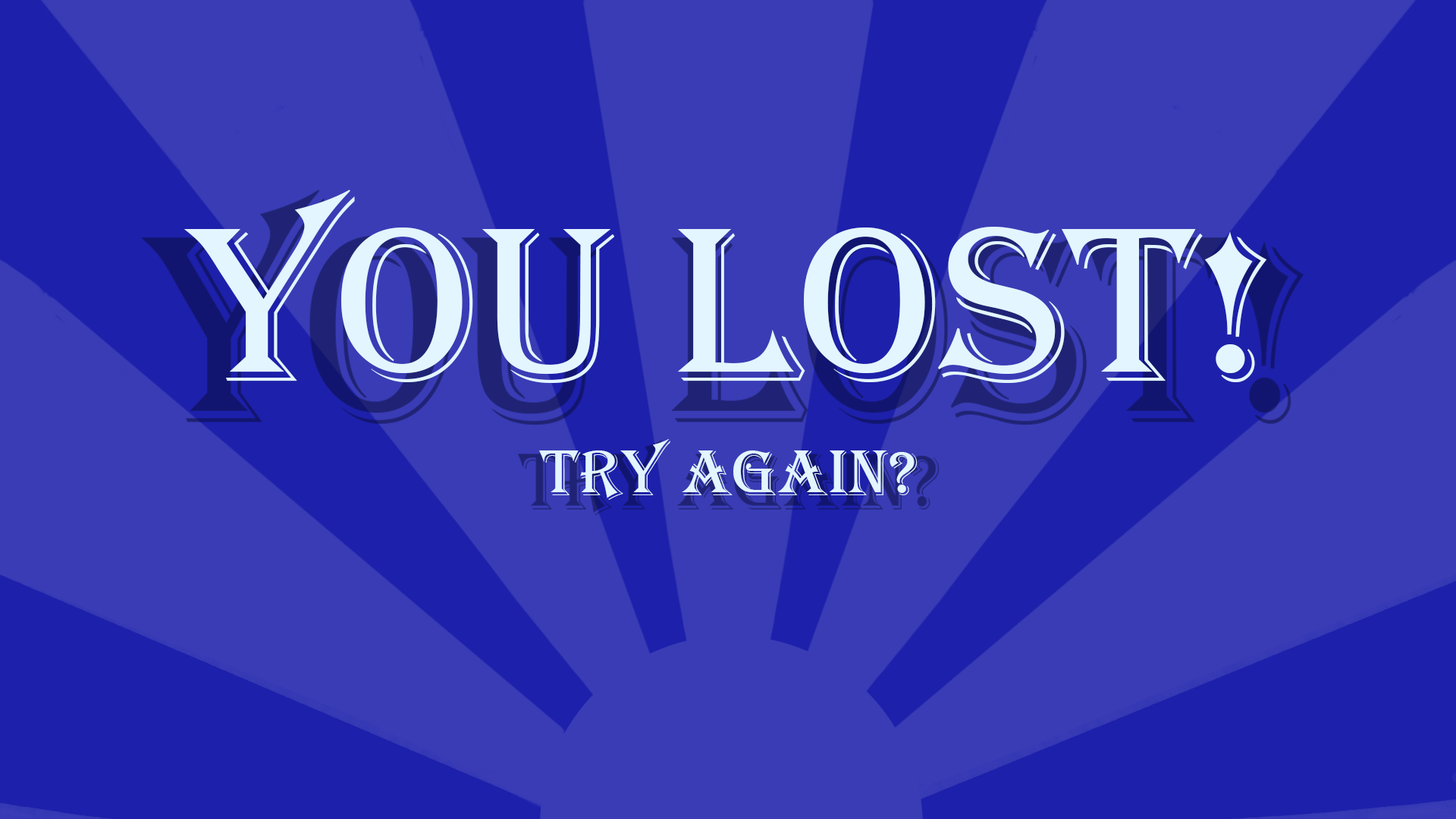
<style>
.page{position:relative;width:1456px;height:819px;background:#393cb5}
.page>*{position:absolute;margin:0}
.t1{font:227.8px "Algerian";color:#e3f5ff}
.t2{font:66.8px "Algerian";color:#e3f5ff}
</style>
<div class="page">
<p class="t1" style="left:184px;top:190px;width:1083px;height:193px">YOU LOST!</p>
<p class="t2" style="left:539px;top:439px;width:378px;height:61px">TRY AGAIN?</p>
</div>
